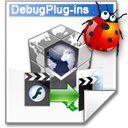
<style>
.page{position:relative;width:128px;height:128px;background:#ffffff}
.page>*{position:absolute;margin:0}
.t1{font:19px "ArialMT";letter-spacing:0.01em;color:#ffffff;font-weight:bold}
</style>
<div class="page">
<p class="t1" style="left:11px;top:5px;width:78px;height:11px">DebugPlug-ins</p>
</div>
